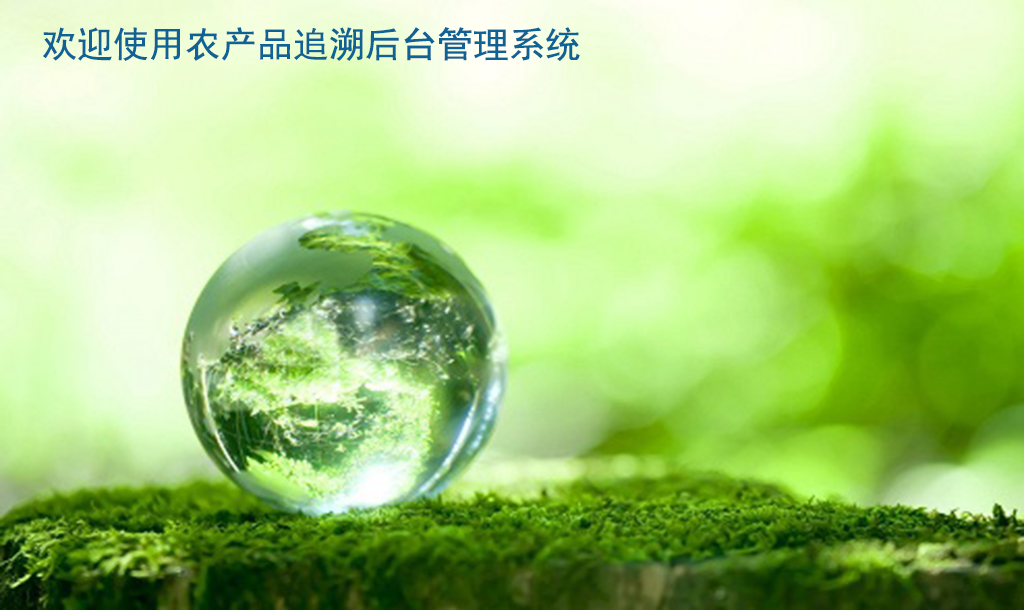
<style>
.page{position:relative;width:1024px;height:610px}
.page>*{position:absolute;margin:0}
.t1{font:36px "SimHei";color:#0f6296}
</style>
<div class="page">
<p class="t1" style="left:43px;top:27px;width:537px;height:34px">欢迎使用农产品追溯后台管理系统</p>
</div>
